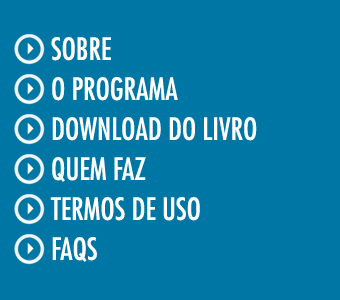
<style>
.page{position:relative;width:340px;height:300px;background:#0076a4}
.page>*{position:absolute;margin:0}
.t1{font:30px "FuturaLT-Condensed";color:#ffffff;text-transform:uppercase}
</style>
<div class="page">
<p class="t1" style="left:51px;top:37px;width:60px;height:24px">Sobre</p>
<p class="t1" style="left:52px;top:77px;width:126px;height:24px">O Programa</p>
<p class="t1" style="left:52px;top:117px;width:205px;height:24px">download do livro</p>
<p class="t1" style="left:52px;top:157px;width:94px;height:25px">quem faz</p>
<p class="t1" style="left:50px;top:197px;width:150px;height:24px">termos de uso</p>
<p class="t1" style="left:52px;top:237px;width:45px;height:25px">FAQS</p>
</div>
